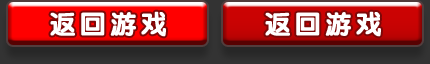
<style>
.page{position:relative;width:430px;height:64px}
.page>*{position:absolute;margin:0}
.t1{font:26px "JCuYuan";letter-spacing:0.15em;color:#ffffff;font-weight:bold}
</style>
<div class="page">
<p class="t1" style="left:50px;top:11px;width:116px;height:26px">返回游戏</p>
<p class="t1" style="left:265px;top:11px;width:116px;height:26px">返回游戏</p>
</div>
